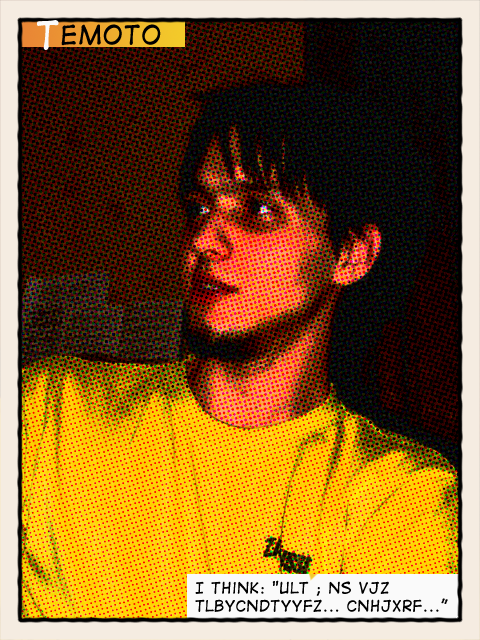
<style>
.page{position:relative;width:480px;height:640px}
.page>*{position:absolute;margin:0}
.t1{font:25px "DigitalStrip";letter-spacing:0.025em;color:#000000}
.t2{font:36.4px "DigitalStrip";letter-spacing:0.025em;color:#fafafa}
.t3{font:15px "DigitalStrip";letter-spacing:0.025em;color:#000000}
</style>
<div class="page">
<p class="t1" style="left:37px;top:20px;width:124px;height:30px"><span class="t2">T</span>emoto</p>
<p class="t3" style="left:195px;top:580px;width:253px;height:32px">I think: "Ult ; ns vjz<br>tlbycndtyyfz... cnhjxrf...”</p>
</div>
